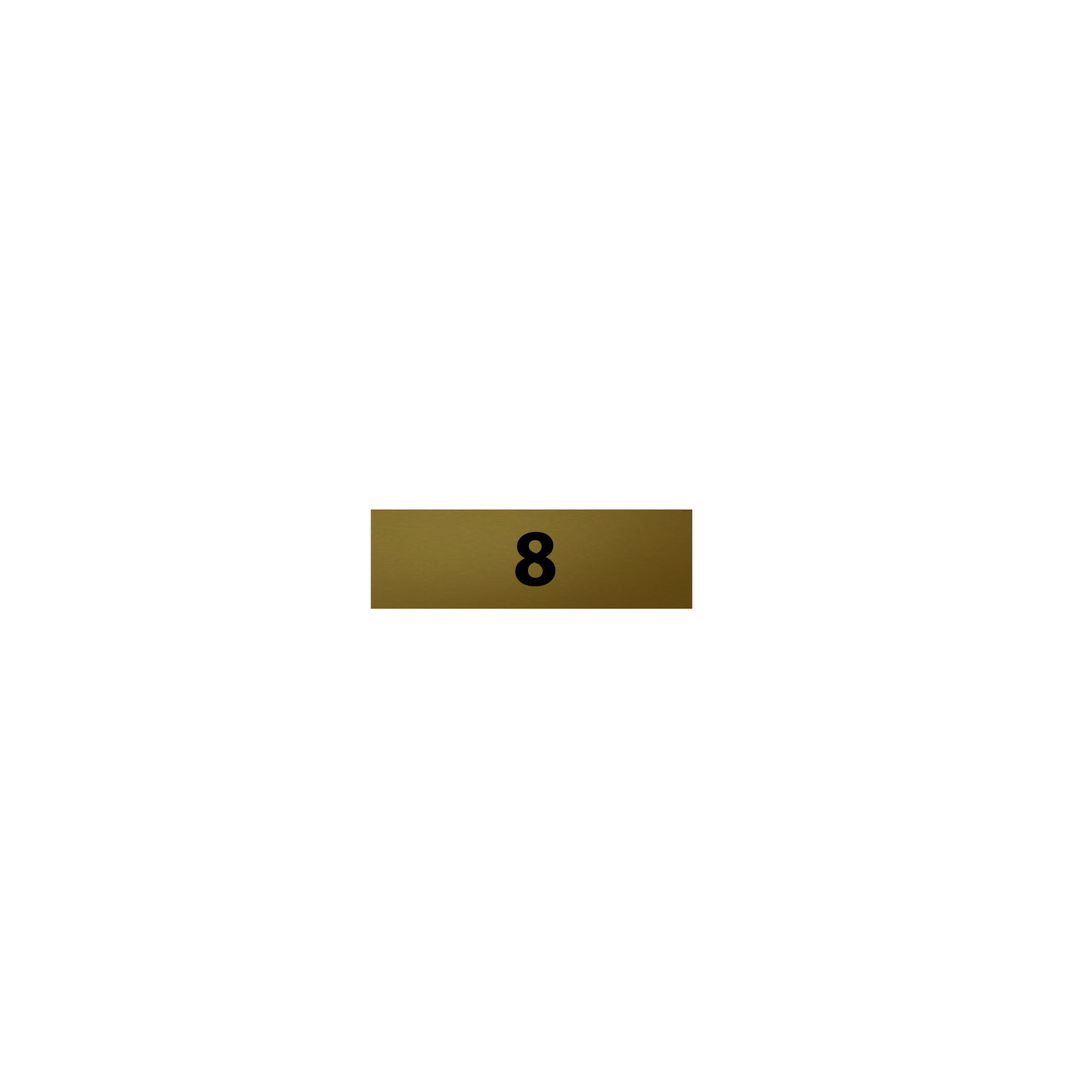
<style>
.page{position:relative;width:1092px;height:1092px;background:#ffffff}
.page>*{position:absolute;margin:0}
.t1{font:81.9px "MyriadPro-Bold";color:#000000}
</style>
<div class="page">
<p class="t1" style="left:515px;top:532px;width:41px;height:54px">8</p>
</div>
